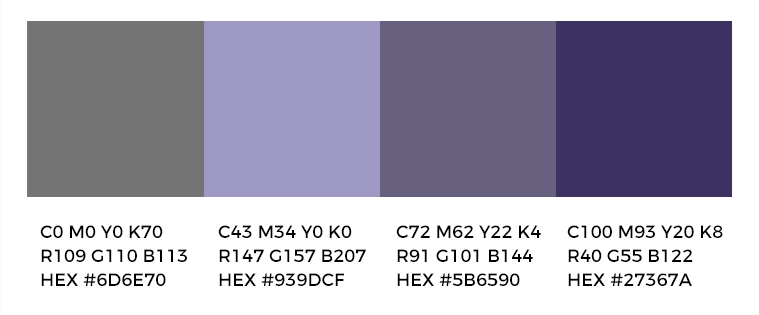
<style>
.page{position:relative;width:759px;height:315px;background:#ffffff}
.page>*{position:absolute;margin:0}
.t1{font:18px/24px "Montserrat-Regular";color:#000000}
</style>
<div class="page">
<p class="t1" style="left:40px;top:225px;width:147px;height:61px">C0 M0 Y0 K70<br>R109 G110 B113<br>HEX #6D6E70</p>
<p class="t1" style="left:218px;top:225px;width:148px;height:61px">C43 M34 Y0 K0<br>R147 G157 B207<br>HEX #939DCF</p>
<p class="t1" style="left:396px;top:225px;width:145px;height:61px">C72 M62 Y22 K4<br>R91 G101 B144<br>HEX #5B6590</p>
<p class="t1" style="left:567px;top:225px;width:156px;height:61px">C100 M93 Y20 K8<br>R40 G55 B122<br>HEX #27367A</p>
</div>
